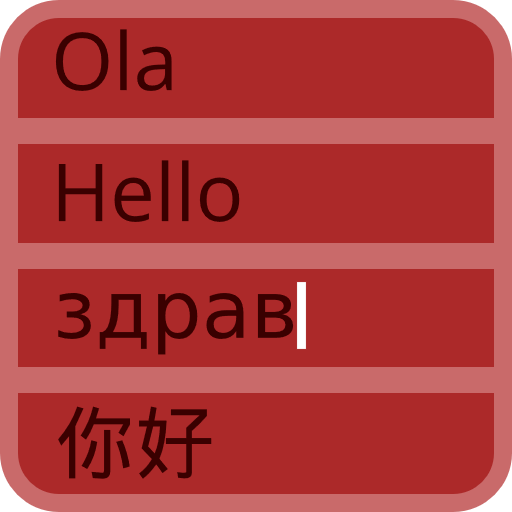
<style>
.page{position:relative;width:512px;height:512px;background:#ac2929}
.page>*{position:absolute;margin:0}
.t1{font:80px "OpenSans-Regular";color:#3a0000}
.t2{font:80px "DejaVuSans";color:#3a0000}
.t3{font:80px "DroidSansFallback";color:#3a0000}
</style>
<div class="page">
<p class="t1" style="left:55px;top:29px;width:117px;height:62px">Ola</p>
<p class="t1" style="left:58px;top:160px;width:182px;height:62px">Hello</p>
<p class="t2" style="left:58px;top:292px;width:236px;height:63px">здрав</p>
<p class="t3" style="left:58px;top:406px;width:154px;height:73px">你好</p>
</div>
